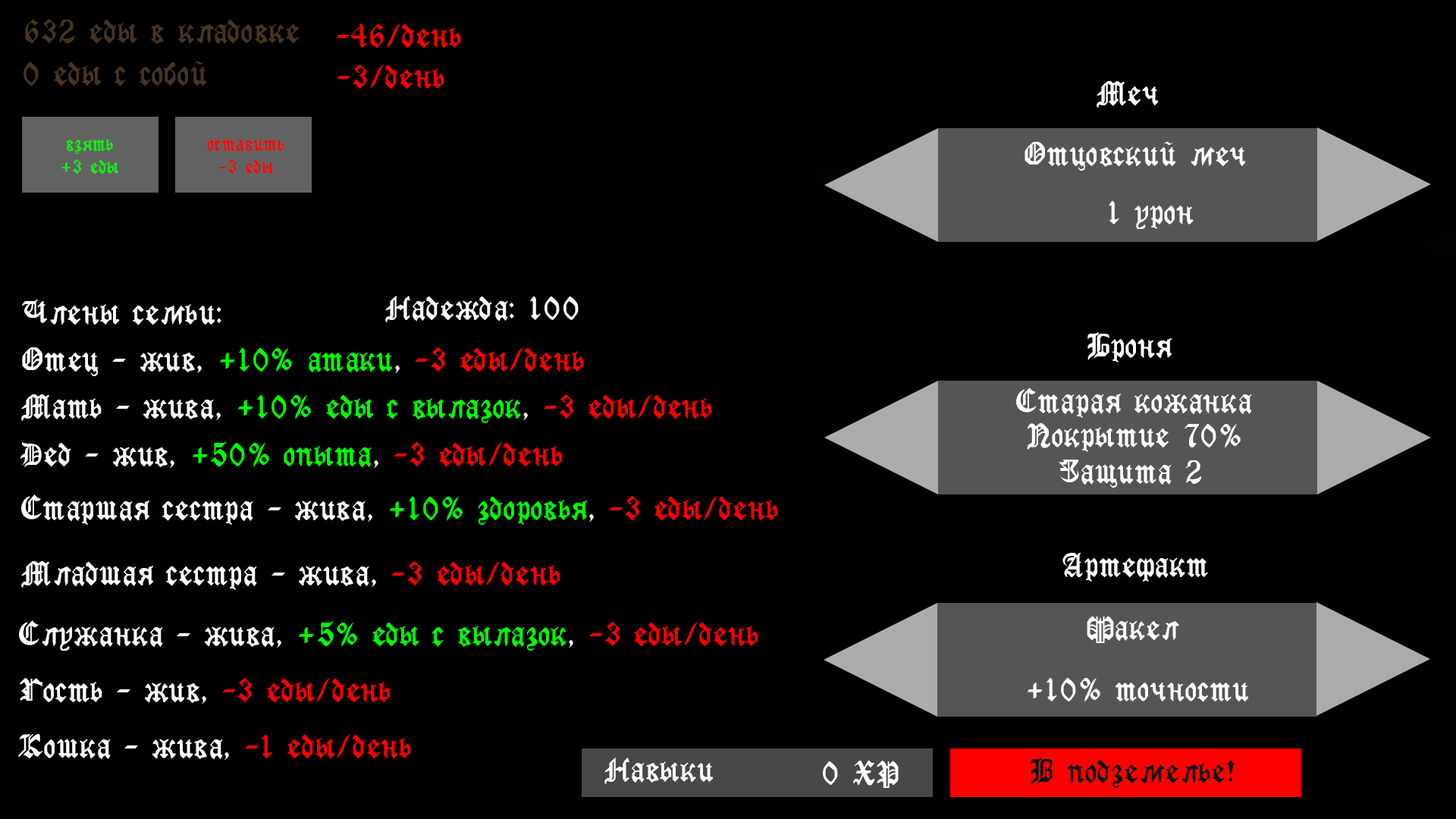
<style>
.page{position:relative;width:1456px;height:819px;background:#000000}
.page>*{position:absolute;margin:0}
.t1{font:31.6px "GothicRusMedium";color:#473421}
.t2{font:31.6px "GothicRusMedium";color:#ff0000}
.t3{font:31.6px "GothicRusMedium";color:#ffffff}
.t4{font:19px "GothicRusMedium";color:#00ff00}
.t5{font:19px "GothicRusMedium";color:#ff0000}
.t6{font:31.6px "GothicRusMedium";color:#00ff00}
.t7{font:31.6px "GothicRusMedium";color:#131313}
</style>
<div class="page">
<p class="t1" style="left:25px;top:19px;width:275px;height:25px">632 еды в кладовке</p>
<p class="t2" style="left:336px;top:24px;width:125px;height:25px">-46/день</p>
<p class="t1" style="left:24px;top:61px;width:182px;height:25px">0 еды с собой</p>
<p class="t2" style="left:337px;top:64px;width:107px;height:25px">-3/день</p>
<p class="t3" style="left:1097px;top:81px;width:61px;height:27px">Меч</p>
<p class="t4" style="left:61px;top:139px;width:58px;height:35px;text-align:center">взять<br>+3 еды</p>
<p class="t5" style="left:207px;top:139px;width:77px;height:35px;text-align:center">оставить<br>-3 еды</p>
<p class="t3" style="left:1024px;top:142px;width:221px;height:29px">Отцовский меч</p>
<p class="t3" style="left:1109px;top:200px;width:85px;height:29px">1 урон</p>
<p class="t3" style="left:22px;top:300px;width:199px;height:25px">Члены семьи:</p>
<p class="t3" style="left:385px;top:296px;width:194px;height:26px">Надежда: 100</p>
<p class="t3" style="left:1087px;top:332px;width:85px;height:30px">Броня</p>
<p class="t3" style="left:22px;top:347px;width:562px;height:29px">Отец - жив, <span class="t6">+10% атаки</span>, <span class="t2">-3 еды/день</span></p>
<p class="t3" style="left:1016px;top:388px;width:236px;height:30px">Старая кожанка</p>
<p class="t6" style="left:21px;top:394px;width:691px;height:29px"><span class="t3">Мать - жива, </span>+10% еды с вылазок<span class="t3">, </span><span class="t2">-3 еды/день</span></p>
<p class="t3" style="left:1027px;top:423px;width:214px;height:29px">Покрытие 70%</p>
<p class="t2" style="left:20px;top:441px;width:543px;height:27px"><span class="t3">Дед - жив, </span><span class="t6">+50% опыта</span><span class="t3">, </span>-3 еды/день</p>
<p class="t3" style="left:1058px;top:460px;width:144px;height:28px">Защита 2</p>
<p class="t3" style="left:21px;top:494px;width:757px;height:31px">Старшая сестра - жива, <span class="t6">+10% здоровья</span>, <span class="t2">-3 еды/день</span></p>
<p class="t3" style="left:1062px;top:553px;width:146px;height:29px">Артефакт</p>
<p class="t3" style="left:21px;top:561px;width:539px;height:29px">Младшая сестра - жива, <span class="t2">-3 еды/день</span></p>
<p class="t3" style="left:1087px;top:616px;width:92px;height:27px">Факел</p>
<p class="t6" style="left:19px;top:620px;width:739px;height:31px"><span class="t3">Служанка - жива, </span>+5% еды с вылазок<span class="t3">, </span><span class="t2">-3 еды/день</span></p>
<p class="t3" style="left:20px;top:678px;width:371px;height:26px">Гость - жив, <span class="t2">-3 еды/день</span></p>
<p class="t3" style="left:1028px;top:677px;width:220px;height:25px">+10% точности</p>
<p class="t3" style="left:18px;top:734px;width:393px;height:26px">Кошка - жива, <span class="t2">-1 еды/день</span></p>
<p class="t3" style="left:604px;top:758px;width:109px;height:26px">Навыки</p>
<p class="t3" style="left:823px;top:761px;width:76px;height:27px">0 ХР</p>
<p class="t7" style="left:1031px;top:758px;width:204px;height:30px">В подземелье!</p>
</div>
